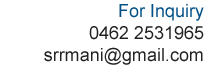
<style>
.page{position:relative;width:213px;height:66px;background:#ffffff}
.page>*{position:absolute;margin:0}
.t1{font:18px/22px "ArialMT";color:#222222}
.t2{font:18px/22px "ArialMT";color:#004f87}
</style>
<div class="page">
<p class="t1" style="left:44px;top:4px;width:160px;height:61px;text-align:right"><span class="t2">For Inquiry<br></span>0462 2531965<br>srrmani@gmail.com</p>
</div>
